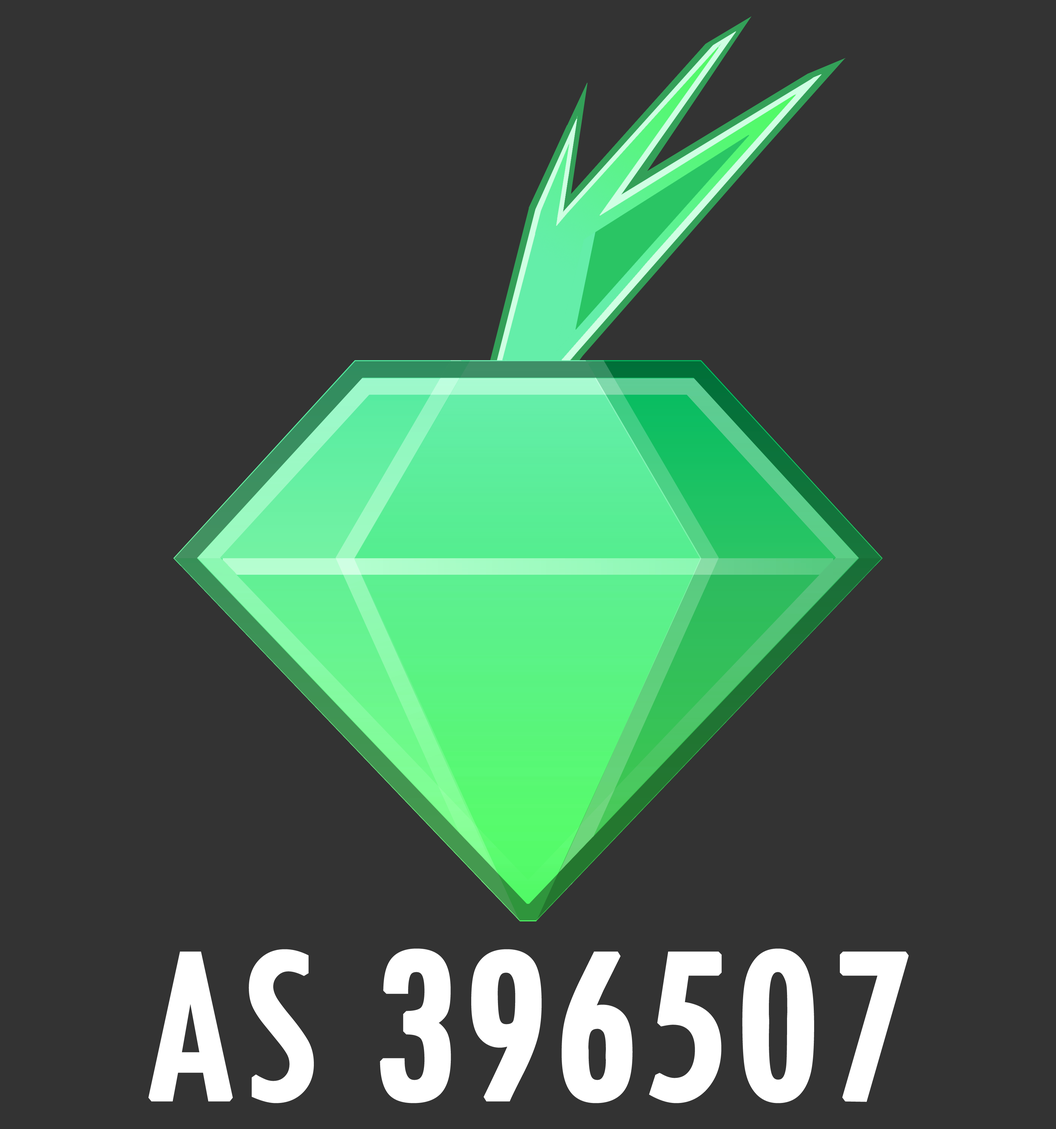
<style>
.page{position:relative;width:1056px;height:1129px;background:#333333}
.page>*{position:absolute;margin:0}
.t1{font:231.1px "TwCenMT-Condensed";color:#ffffff;font-weight:bold}
</style>
<div class="page">
<p class="t1" style="left:148px;top:948px;width:761px;height:155px">AS 396507</p>
</div>
